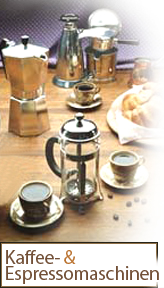
<style>
.page{position:relative;width:164px;height:288px}
.page>*{position:absolute;margin:0}
.t1{font:19.5px/16px "Myriad-Roman";letter-spacing:-0.015em;color:#725037}
.t2{font:19.5px/16px "Myriad-Roman";letter-spacing:-0.015em;color:#bb7432}
</style>
<div class="page">
<p class="t1" style="left:6px;top:250px;width:153px;height:34px">Kaffee- <span class="t2">&amp;<br></span>Espressomaschinen</p>
</div>
